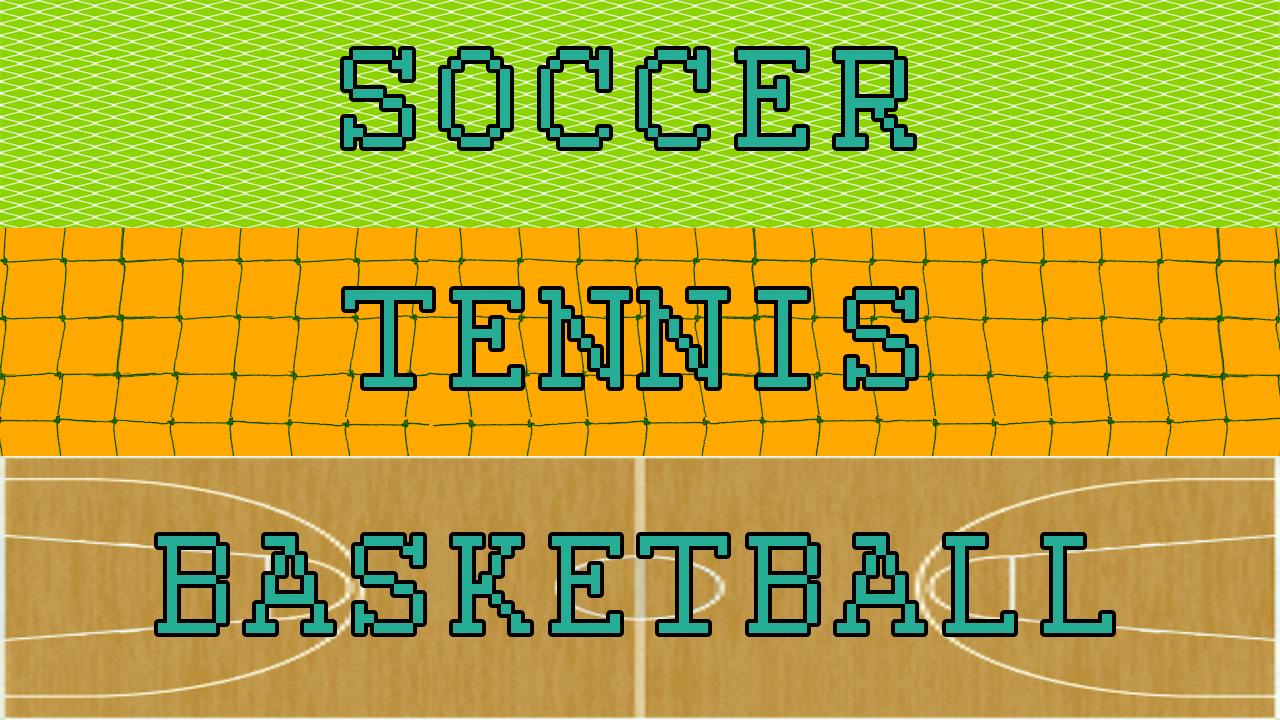
<style>
.page{position:relative;width:1280px;height:720px;background:#ffa800}
.page>*{position:absolute;margin:0}
.t1{font:222px "Courier";letter-spacing:0.05em;color:#25ad95;font-variant:small-caps}
</style>
<div class="page">
<p class="t1" style="left:344px;top:50px;width:569px;height:97px">soccer</p>
<p class="t1" style="left:345px;top:290px;width:570px;height:97px">tennis</p>
<p class="t1" style="left:158px;top:536px;width:954px;height:97px">basketball</p>
</div>
